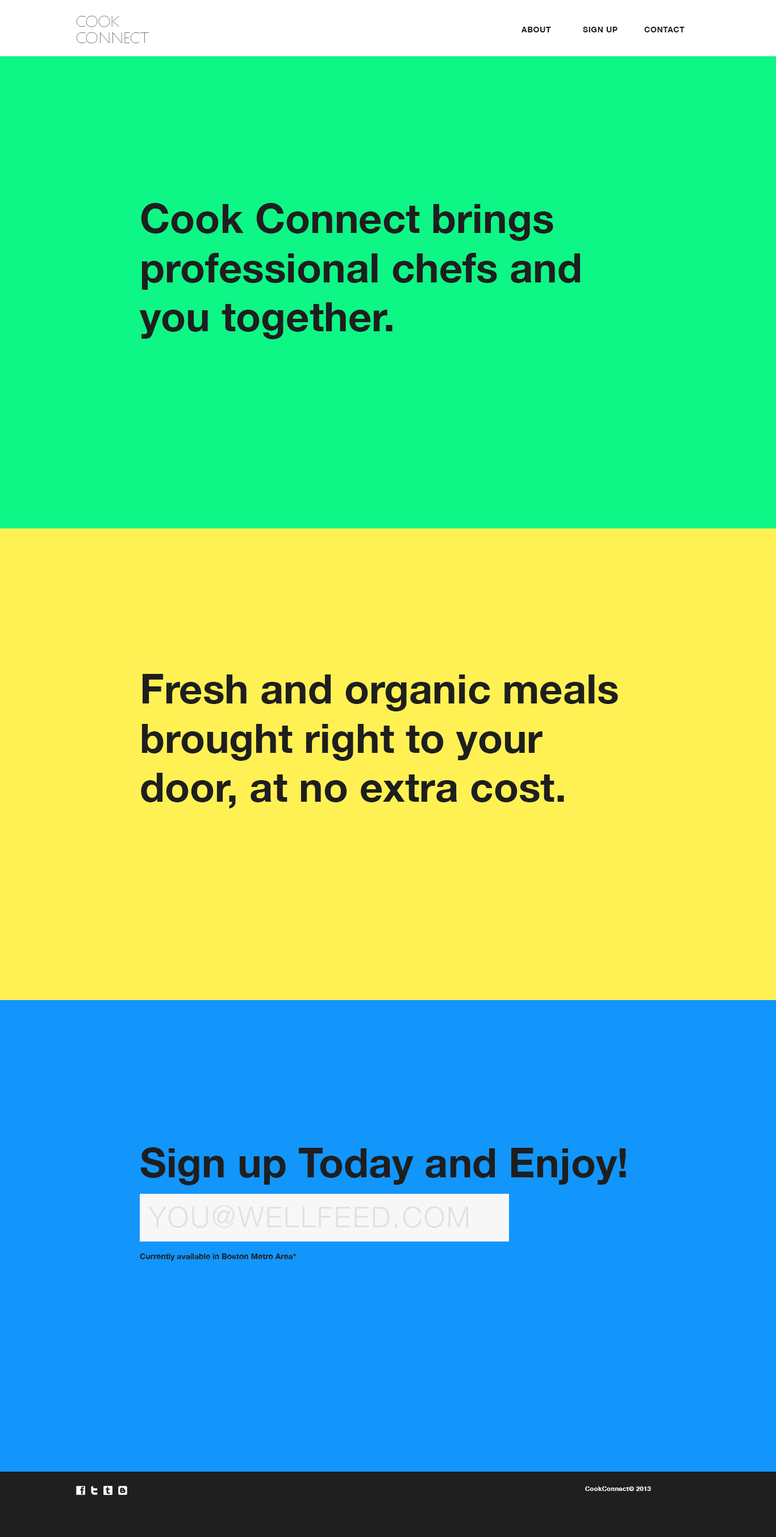
<style>
.page{position:relative;width:776px;height:1537px;background:#0ef686}
.page>*{position:absolute;margin:0}
.t1{font:13.6px "History-One"}
.t2{font:8px "HelveticaNeue-Bold";letter-spacing:0.04em;color:#1e1e1e}
.t3{font:40.9px "HelveticaNeue-Bold";color:#1e1e1e}
.t4{font:8px/20.5px "HelveticaNeue-Bold";color:#1e1e1e}
.t5{font:40.9px/20.5px "HelveticaNeue-Bold";color:#1e1e1e}
.t6{font:40.3px "HelveticaNeue-Light";letter-spacing:0.06em;color:#e2e0e0;font-variant:small-caps}
.t7{font:30.7px "HelveticaNeue-Light";letter-spacing:0.06em;color:#e2e0e0;font-variant:small-caps}
.t8{font:6.2px "HelveticaNeue-Bold";letter-spacing:0.04em;color:#ffffff}
</style>
<div class="page">
<p class="t1" style="left:76px;top:15px;width:73px;height:29px">Cook <br>connect</p>
<p class="t2" style="left:521px;top:27px;width:164px;height:5px">ABOUT  SIGN UP  CONTACT</p>
<p class="t3" style="left:139px;top:203px;width:442px;height:136px">Cook Connect brings <br>professional chefs and you together.</p>
<p class="t3" style="left:141px;top:674px;width:477px;height:134px">Fresh and organic meals brought right to your door, at no extra cost.</p>
<p class="t4" style="left:140px;top:1147px;width:486px;height:114px"><span class="t5">Sign up Today and Enjoy!<br><br><br><br></span>Currently available in Boston Metro Area*</p>
<p class="t6" style="left:148px;top:1205px;width:321px;height:23px">you<span class="t7">@</span>wellfeed<span class="t7">.</span>com</p>
<p class="t8" style="left:585px;top:1486px;width:66px;height:5px">CookConnect© 2013</p>
</div>
